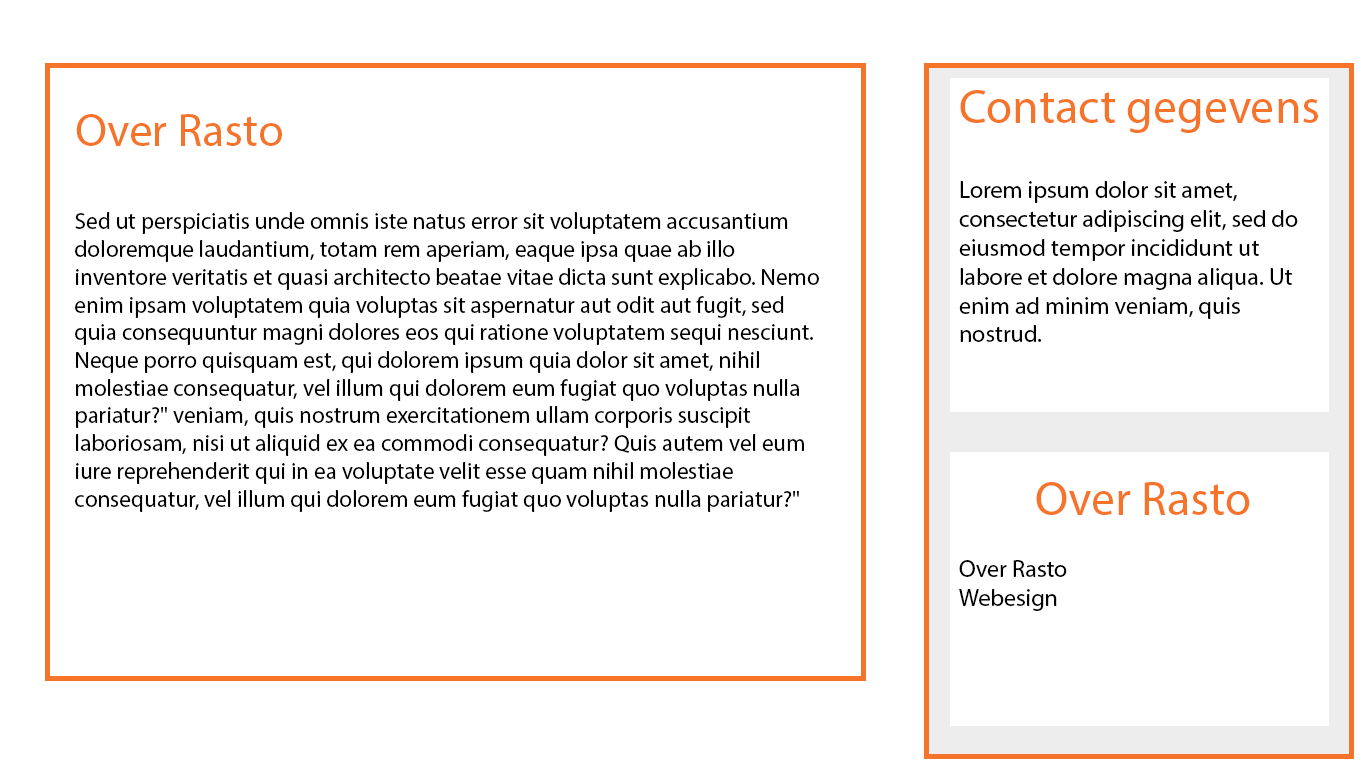
<style>
.page{position:relative;width:1366px;height:768px;background:#ffffff}
.page>*{position:absolute;margin:0}
.t1{font:48px "MyriadPro-Regular";color:#f67429}
.t2{font:23.1px "MyriadPro-Regular";color:#000000}
.t3{font:46.2px "MyriadPro-Regular";color:#f67429}
.t4{font:24px "MyriadPro-Regular";color:#000000}
</style>
<div class="page">
<p class="t1" style="left:960px;top:90px;width:358px;height:43px">Contact gegevens</p>
<p class="t2" style="left:75px;top:114px;width:744px;height:398px"><span class="t3">Over Rasto<br><br></span>Sed ut perspiciatis unde omnis iste natus error sit voluptatem accusantium doloremque laudantium, totam rem aperiam, eaque ipsa quae ab illo inventore veritatis et quasi architecto beatae vitae dicta sunt explicabo. Nemo enim ipsam voluptatem quia voluptas sit aspernatur aut odit aut fugit, sed quia consequuntur magni dolores eos qui ratione voluptatem sequi nesciunt. Neque porro quisquam est, qui dolorem ipsum quia dolor sit amet, nihil molestiae consequatur, vel illum qui dolorem eum fugiat quo voluptas nulla pariatur?" veniam, quis nostrum exercitationem ullam corporis suscipit laboriosam, nisi ut aliquid ex ea commodi consequatur? Quis autem vel eum iure reprehenderit qui in ea voluptate velit esse quam nihil molestiae consequatur, vel illum qui dolorem eum fugiat quo voluptas nulla pariatur?"</p>
<p class="t4" style="left:959px;top:181px;width:339px;height:161px"><span class="t1"><br><br></span>Lorem ipsum dolor sit amet, consectetur adipiscing elit, sed do eiusmod tempor incididunt ut labore et dolore magna aliqua. Ut enim ad minim veniam, quis nostrud.</p>
<p class="t1" style="left:1036px;top:482px;width:214px;height:33px">Over Rasto</p>
<p class="t4" style="left:959px;top:560px;width:108px;height:51px"><span class="t1"><br></span>Over Rasto<br>Webesign</p>
</div>
